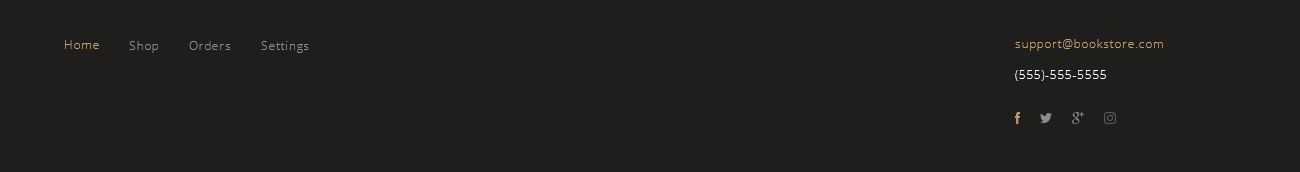
<style>
.page{position:relative;width:1300px;height:172px;background:#1e1e1c}
.page>*{position:absolute;margin:0}
.t1{font:12px "OpenSans-Light";letter-spacing:0.05em;color:#c69c6d}
.t2{font:12px "OpenSans-Light";letter-spacing:0.05em;color:#8c8c8c}
.t3{font:12px "OpenSans-Light";letter-spacing:0.05em;color:#fdfbfb}
</style>
<div class="page">
<p class="t1" style="left:65px;top:40px;width:34px;height:9px">Home</p>
<p class="t2" style="left:129px;top:41px;width:29px;height:12px">Shop</p>
<p class="t2" style="left:189px;top:41px;width:41px;height:9px">Orders</p>
<p class="t2" style="left:261px;top:41px;width:48px;height:12px">Settings</p>
<p class="t1" style="left:1015px;top:39px;width:148px;height:12px">support@bookstore.com</p>
<p class="t3" style="left:1015px;top:70px;width:91px;height:11px">(555)-555-5555</p>
</div>
